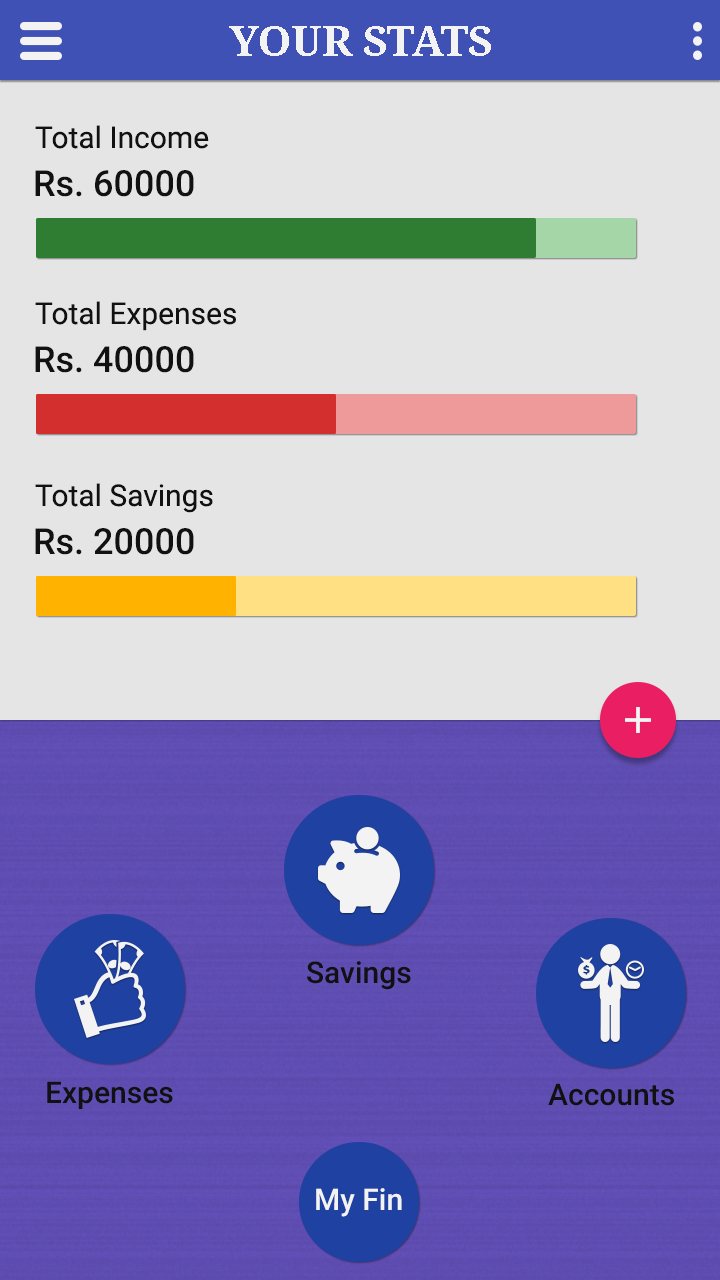
<style>
.page{position:relative;width:720px;height:1280px;background:#e5e5e5}
.page>*{position:absolute;margin:0}
.t1{font:42px "NotoSerif-Bold";color:#f3f3f3}
.t2{font:30px "Roboto-Regular";color:#111111}
.t3{font:36px "Roboto-Medium";color:#111111}
.t4{font:30px "Roboto-Medium";color:#111111}
.t5{font:30px "Roboto-Medium";color:#f3f3f3}
</style>
<div class="page">
<p class="t1" style="left:229px;top:26px;width:262px;height:30px">YOUR STATS</p>
<p class="t2" style="left:35px;top:125px;width:174px;height:24px">Total Income</p>
<p class="t3" style="left:35px;top:170px;width:159px;height:27px">Rs. 60000</p>
<p class="t2" style="left:35px;top:301px;width:201px;height:30px">Total Expenses</p>
<p class="t3" style="left:35px;top:346px;width:159px;height:27px">Rs. 40000</p>
<p class="t2" style="left:35px;top:483px;width:178px;height:30px">Total Savings</p>
<p class="t3" style="left:35px;top:528px;width:159px;height:27px">Rs. 20000</p>
<p class="t4" style="left:307px;top:961px;width:104px;height:29px">Savings</p>
<p class="t4" style="left:47px;top:1081px;width:126px;height:28px">Expenses</p>
<p class="t4" style="left:548px;top:1083px;width:126px;height:23px">Accounts</p>
<p class="t5" style="left:316px;top:1188px;width:86px;height:29px">My Fin</p>
</div>
